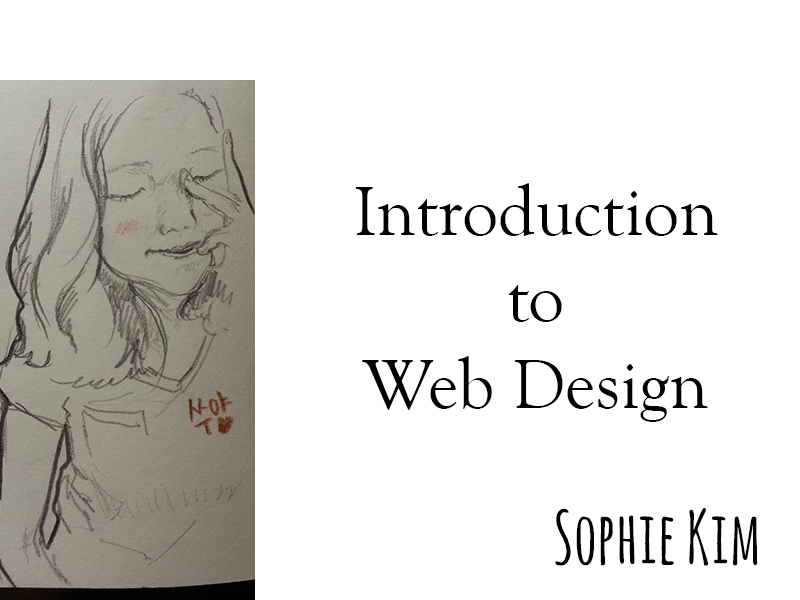
<style>
.page{position:relative;width:800px;height:600px;background:#ffffff}
.page>*{position:absolute;margin:0}
.t1{font:72px "GoudyOldStyleT-Regular";color:#000000}
.t2{font:72px "AmaticSC-Bold";color:#000000}
</style>
<div class="page">
<p class="t1" style="left:355px;top:183px;width:363px;height:239px;text-align:center">Introduction<br>to<br>Web Design</p>
<p class="t2" style="left:555px;top:508px;width:16px;height:58px">S</p>
<p class="t2" style="left:689px;top:508px;width:20px;height:58px">K</p>
<p class="t2" style="left:576px;top:516px;width:18px;height:50px">o</p>
<p class="t2" style="left:600px;top:516px;width:13px;height:50px">p</p>
<p class="t2" style="left:619px;top:515px;width:16px;height:49px">h</p>
<p class="t2" style="left:639px;top:516px;width:17px;height:48px">i</p>
<p class="t2" style="left:661px;top:516px;width:13px;height:49px">e</p>
<p class="t2" style="left:711px;top:516px;width:17px;height:48px">i</p>
<p class="t2" style="left:733px;top:516px;width:25px;height:50px">m</p>
</div>
